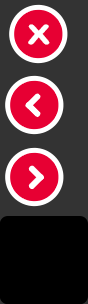
<style>
.page{position:relative;width:88px;height:304px;background:#333333}
.page>*{position:absolute;margin:0}
.t1{font:37.1px "ArialRoundedMTBold";color:#ffffff;scale:1.21 1}
</style>
<div class="page">
<p class="t1" style="left:28px;top:24px;width:22px;height:21px">x</p>
</div>
